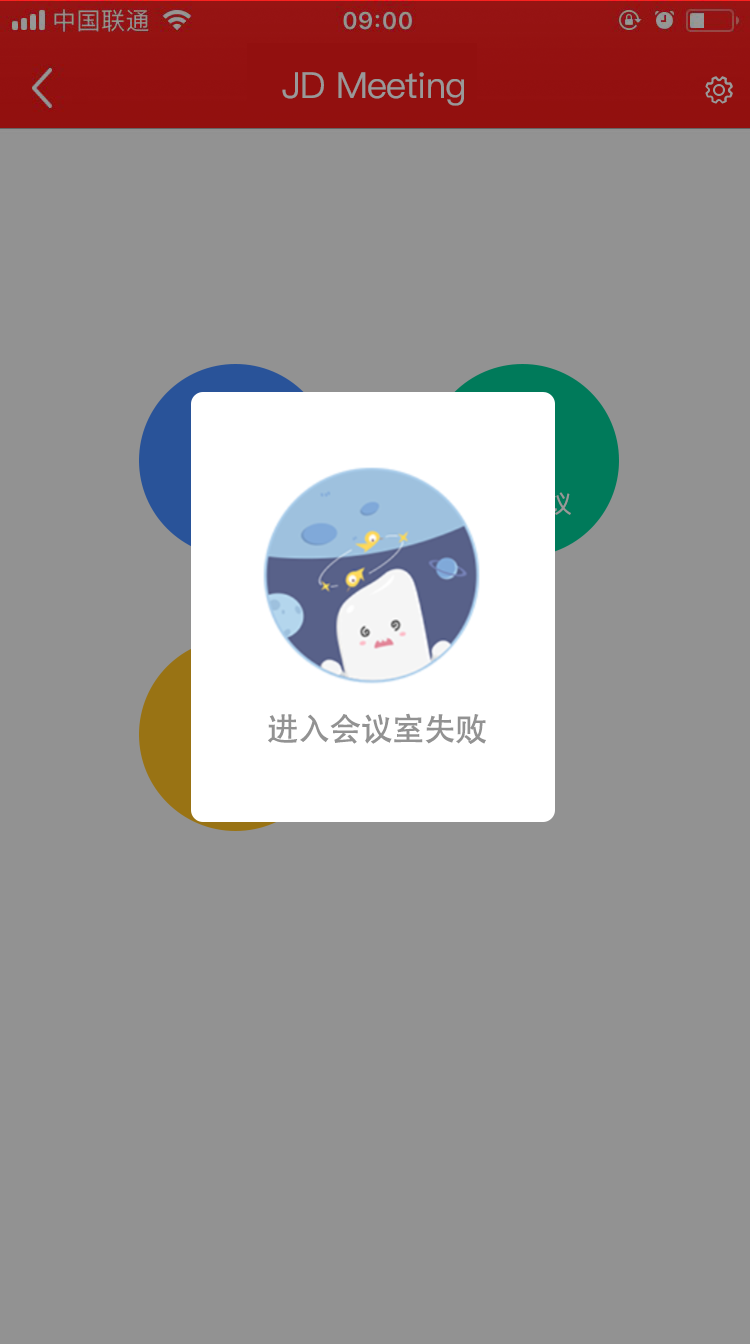
<style>
.page{position:relative;width:750px;height:1344px;background:#929292}
.page>*{position:absolute;margin:0}
.t1{font:36px "PingFangSC-Regular";letter-spacing:-0.02em;color:#999999}
.t2{font:32px "AdobeHeitiStd-Regular";letter-spacing:-0.02em;color:#929292}
</style>
<div class="page">
<p class="t1" style="left:282px;top:72px;width:182px;height:34px">JD Meeting</p>
<p class="t2" style="left:268px;top:713px;width:218px;height:31px">进入会议室失败</p>
</div>
